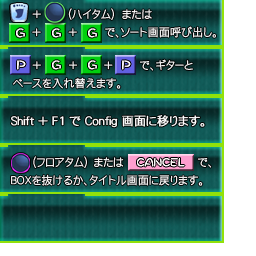
<style>
.page{position:relative;width:256px;height:256px}
.page>*{position:absolute;margin:0}
.t1{font:11px/18px "DFGothicP-W2-WING-RKSJ-H";color:#ffffff;font-weight:bold}
.t2{font:12px "DFGothicP-W2-WING-RKSJ-H";color:#ffffff;font-weight:bold}
</style>
<div class="page">
<p class="t1" style="left:32px;top:8px;width:184px;height:30px">+       (ハイタム)  または<br> 　　 +       +       で、ソート画面呼び出し。</p>
<p class="t1" style="left:13px;top:59px;width:180px;height:30px">+       ＋     +     で、ギターと<br>ベースを入れ替えます。</p>
<p class="t2" style="left:11px;top:115px;width:194px;height:13px">Shift + F1 で Config 画面に移ります。</p>
<p class="t1" style="left:11px;top:156px;width:201px;height:30px">（フロアタム） または        で、<br>BOXを抜けるか、タイトル画面に戻ります。</p>
</div>
